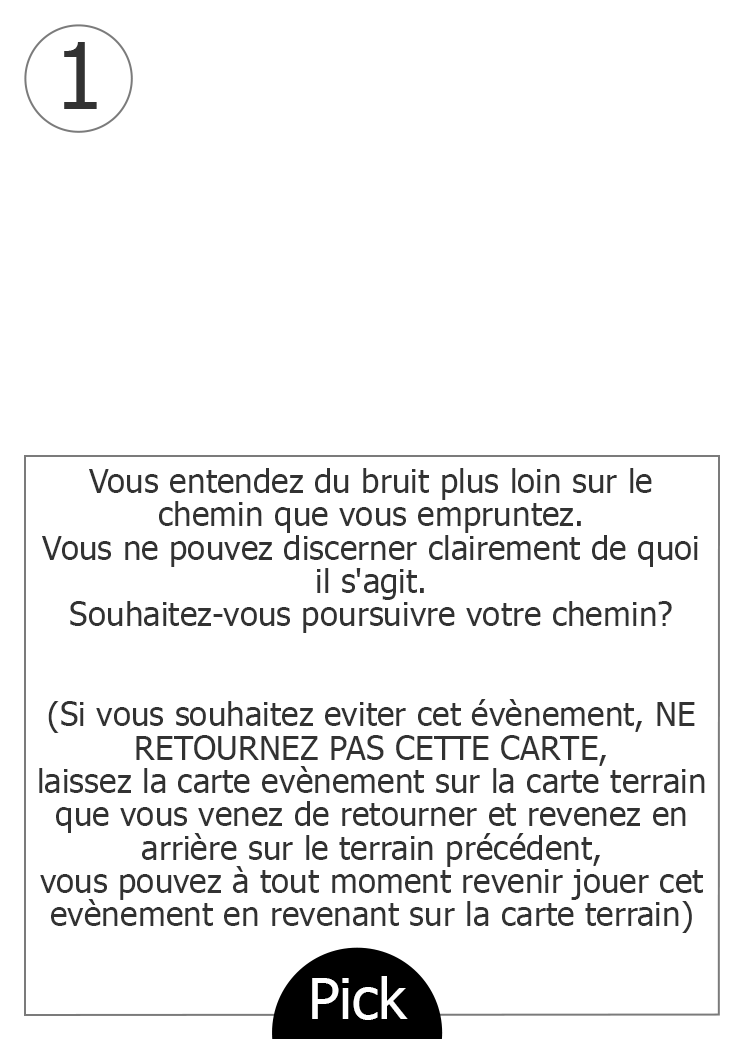
<style>
.page{position:relative;width:744px;height:1039px;background:#ffffff}
.page>*{position:absolute;margin:0}
.t1{font:92px "Tahoma";color:#323232}
.t2{font:33.3px/33.3px "Tahoma";color:#323232}
.t3{font:56.6px "Tahoma";color:#ffffff}
</style>
<div class="page">
<p class="t1" style="left:64px;top:42px;width:33px;height:67px">1</p>
<p class="t2" style="left:39px;top:468px;width:666px;height:465px;text-align:center">Vous entendez du bruit plus loin sur le chemin que vous empruntez. <br>Vous ne pouvez discerner clairement de quoi il s'agit. <br>Souhaitez-vous poursuivre votre chemin?<br><br><br>(Si vous souhaitez eviter cet évènement, NE RETOURNEZ PAS CETTE CARTE, <br>laissez la carte evènement sur la carte terrain que vous venez de retourner et revenez en arrière sur le terrain précédent, <br>vous pouvez à tout moment revenir jouer cet evènement en revenant sur la carte terrain)</p>
<p class="t3" style="left:312px;top:976px;width:96px;height:44px">Pick</p>
</div>
